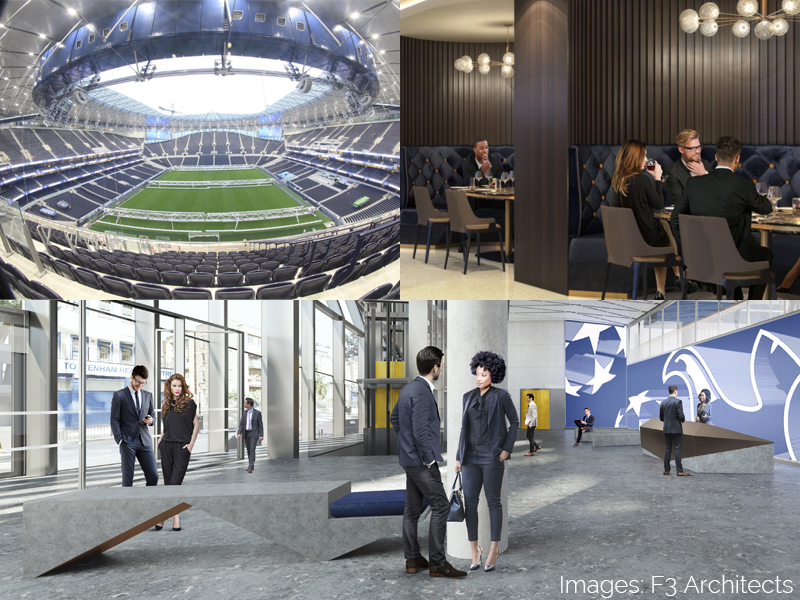
<style>
.page{position:relative;width:800px;height:600px}
.page>*{position:absolute;margin:0}
.t1{font:24px "Raleway-Light";color:#ffffff}
</style>
<div class="page">
<p class="t1" style="left:561px;top:575px;width:232px;height:23px">Images: F3 Architects</p>
</div>
